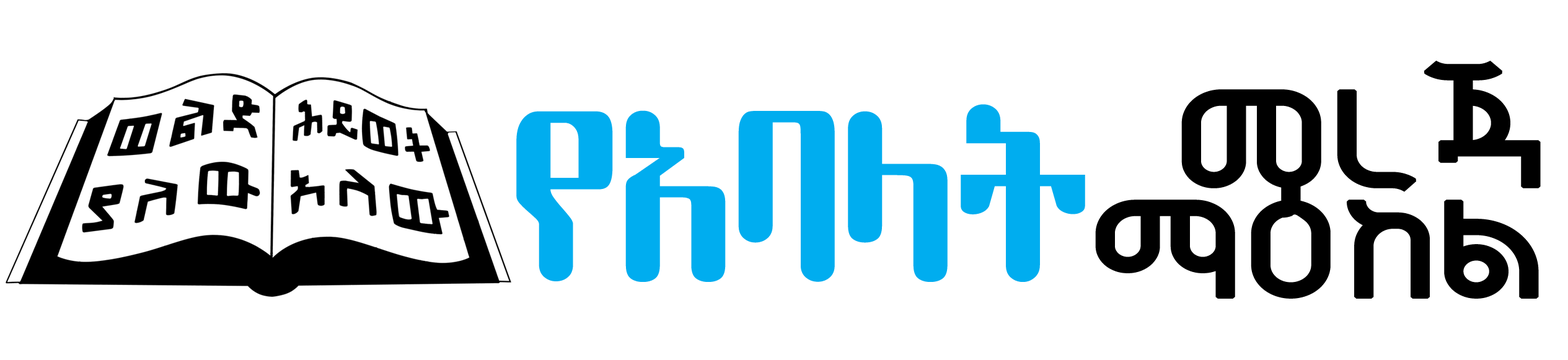
<style>
.page{position:relative;width:1568px;height:360px;background:#ffffff}
.page>*{position:absolute;margin:0}
.t1{font:130.1px/110.4px "KanaNikodimos";letter-spacing:-0.04em;color:#000000;font-weight:bold;scale:1.18 1}
.t2{font:225.5px "EthiopicYebse";letter-spacing:-0.04em;color:#00adef}
</style>
<div class="page">
<p class="t1" style="left:1095px;top:61px;width:446px;height:238px;text-align:right">መረጃ<br>ማዕከል</p>
<p class="t2" style="left:516px;top:104px;width:569px;height:178px">የአባላት</p>
</div>
